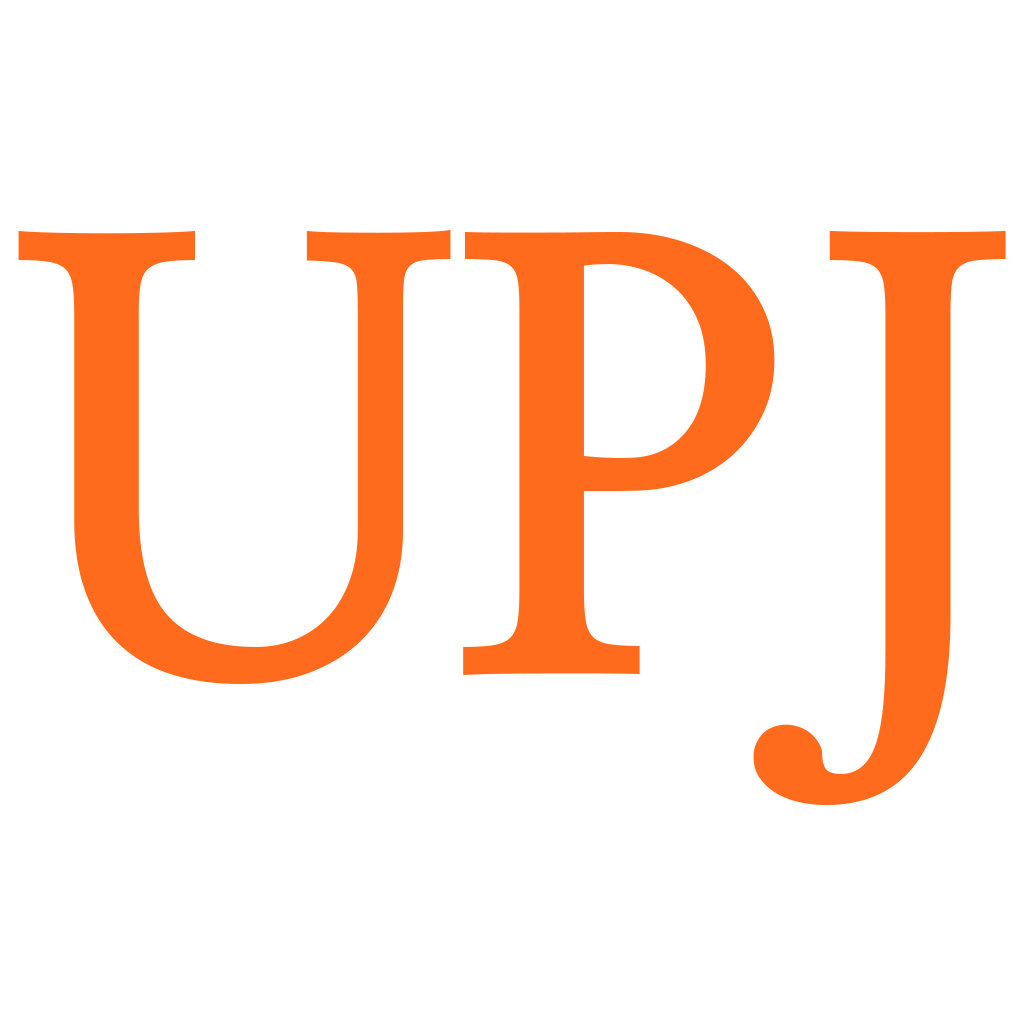
<style>
.page{position:relative;width:1024px;height:1024px;background:#ffffff}
.page>*{position:absolute;margin:0}
.t1{font:600px "NanumMyeongjoExtraBold";color:#ff6b1c}
</style>
<div class="page">
<p class="t1" style="left:18px;top:230px;width:988px;height:575px">UPJ</p>
</div>
